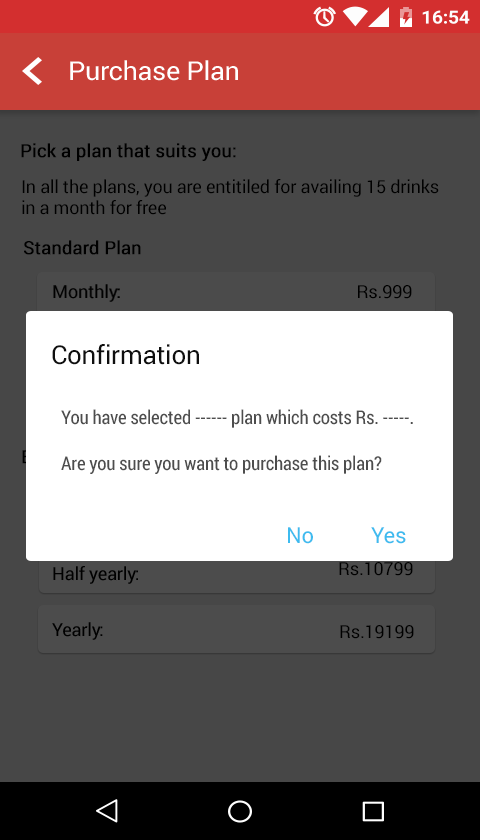
<style>
.page{position:relative;width:480px;height:840px;background:#474747}
.page>*{position:absolute;margin:0}
.t1{font:26.1px "Roboto-Regular";letter-spacing:-0.01em;color:#ffffff;scale:1.03 1}
.t2{font:18px "Roboto-Regular";letter-spacing:-0.01em;color:#000000;font-weight:bold}
.t3{font:18px "Roboto-Regular";letter-spacing:-0.01em;color:#000000}
.t4{font:26px "Roboto-Regular";letter-spacing:-0.01em;color:#0f0f0f}
.t5{font:19px "RobotoCondensed-Regular";letter-spacing:-0.01em;color:#4d4d4d}
.t6{font:22px "Roboto-Regular";letter-spacing:-0.01em;color:#3fbcef}
</style>
<div class="page">
<p class="t1" style="left:70px;top:60px;width:168px;height:21px">Purchase Plan</p>
<p class="t2" style="left:21px;top:143px;width:215px;height:18px">Pick a plan that suits you:</p>
<p class="t3" style="left:22px;top:179px;width:417px;height:36px">In all the plans, you are entitiled for availing 15 drinks in a month for free</p>
<p class="t2" style="left:24px;top:240px;width:117px;height:15px">Standard Plan</p>
<p class="t3" style="left:53px;top:284px;width:67px;height:18px">Monthly:</p>
<p class="t3" style="left:358px;top:285px;width:54px;height:14px">Rs.999</p>
<p class="t3" style="left:55px;top:340px;width:87px;height:18px">Half Yearly:</p>
<p class="t4" style="left:52px;top:344px;width:147px;height:21px">Confirmation</p>
<p class="t5" style="left:61px;top:409px;width:352px;height:65px">You have selected ------ plan which costs Rs. -----. <br>  <br>Are you sure you want to purchase this plan?</p>
<p class="t2" style="left:22px;top:449px;width:77px;height:15px">Elite Plan</p>
<p class="t6" style="left:288px;top:527px;width:25px;height:17px">No</p>
<p class="t6" style="left:371px;top:527px;width:35px;height:17px">Yes</p>
<p class="t3" style="left:53px;top:566px;width:85px;height:18px">Half yearly:</p>
<p class="t3" style="left:339px;top:562px;width:74px;height:14px">Rs.10799</p>
<p class="t3" style="left:52px;top:622px;width:51px;height:18px">Yearly:</p>
<p class="t3" style="left:340px;top:625px;width:74px;height:14px">Rs.19199</p>
</div>
